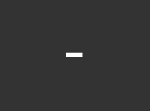
<style>
.page{position:relative;width:150px;height:111px;background:#333333}
.page>*{position:absolute;margin:0}
.t1{font:66.7px "MyriadPro-Regular";letter-spacing:-0.075em;color:#ffffff}
</style>
<div class="page">
<p class="t1" style="left:66px;top:52px;width:17px;height:5px">-</p>
</div>
